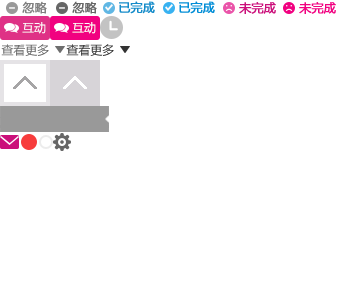
<style>
.page{position:relative;width:340px;height:300px;background:#ffffff}
.page>*{position:absolute;margin:0}
.t1{font:12px "MicrosoftYaHei";color:#808080;font-weight:bold}
.t2{font:12px "MicrosoftYaHei";color:#666666;font-weight:bold}
.t3{font:12px "MicrosoftYaHei";color:#148bc9;font-weight:bold}
.t4{font:12px "MicrosoftYaHei";color:#018dd6;font-weight:bold}
.t5{font:12px "MicrosoftYaHei";color:#cb0f7a;font-weight:bold}
.t6{font:12px "MicrosoftYaHei";color:#f10180;font-weight:bold}
.t7{font:12px "MicrosoftYaHei";color:#ffffff}
.t8{font:12px "MicrosoftYaHei";color:#666666}
.t9{font:12px "MicrosoftYaHei";color:#333333}
</style>
<div class="page">
<p class="t1" style="left:22px;top:1px;width:25px;height:13px">忽略</p>
<p class="t2" style="left:72px;top:1px;width:25px;height:13px">忽略</p>
<p class="t3" style="left:119px;top:1px;width:36px;height:13px">已完成</p>
<p class="t4" style="left:179px;top:1px;width:36px;height:13px">已完成</p>
<p class="t5" style="left:239px;top:2px;width:37px;height:12px">未完成</p>
<p class="t6" style="left:299px;top:2px;width:37px;height:12px">未完成</p>
<p class="t7" style="left:22px;top:22px;width:24px;height:12px">互动</p>
<p class="t7" style="left:72px;top:22px;width:24px;height:12px">互动</p>
<p class="t8" style="left:1px;top:44px;width:48px;height:12px">查看更多</p>
<p class="t9" style="left:66px;top:44px;width:48px;height:12px">查看更多</p>
</div>
